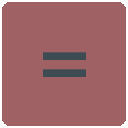
<style>
.page{position:relative;width:128px;height:128px;background:#9f6164}
.page>*{position:absolute;margin:0}
.t1{font:83.3px "MyriadPro-Bold";color:#3d4c53}
</style>
<div class="page">
<p class="t1" style="left:43px;top:52px;width:43px;height:25px">=</p>
</div>
